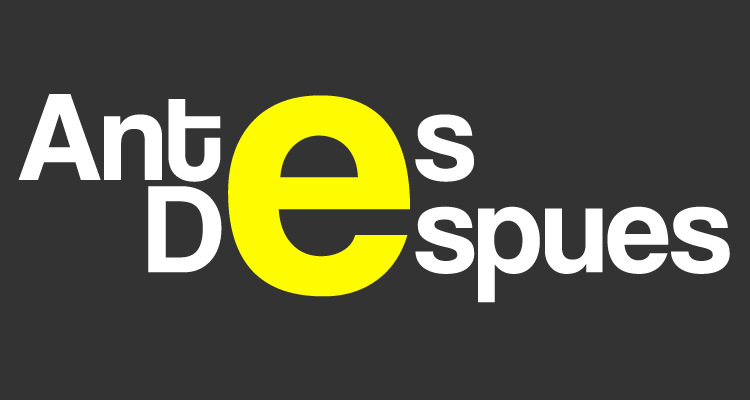
<style>
.page{position:relative;width:750px;height:400px;background:#333333}
.page>*{position:absolute;margin:0}
.t1{font:129.2px "CoolveticaRg-Regular";color:#ffffff}
.t2{font:387.5px "CoolveticaRg-Regular";color:#fffc01}
</style>
<div class="page">
<p class="t1" style="left:18px;top:94px;width:456px;height:88px">Ant      s</p>
<p class="t2" style="left:228px;top:95px;width:182px;height:202px">e</p>
<p class="t1" style="left:148px;top:186px;width:582px;height:117px">D      spues</p>
</div>
